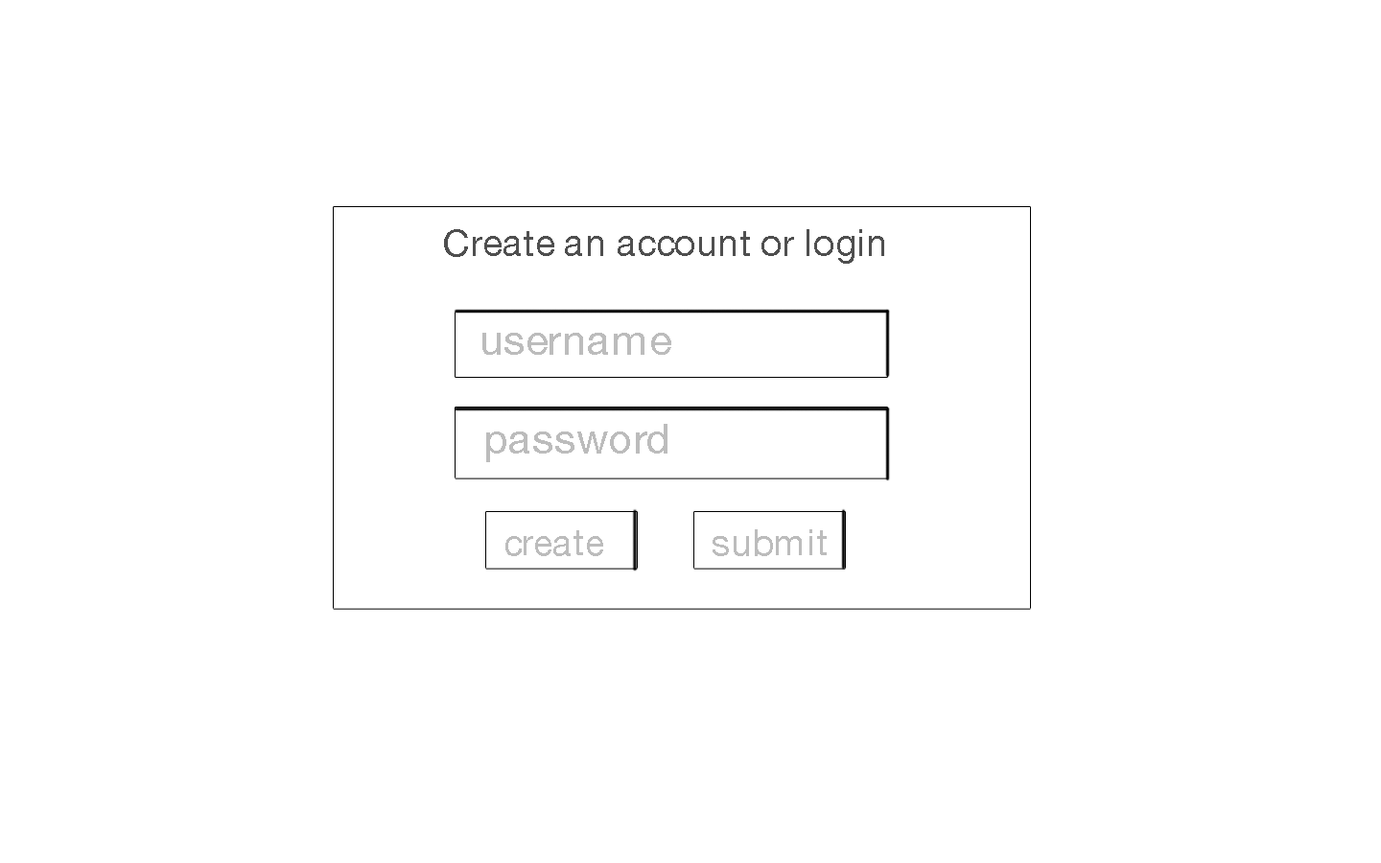
<style>
.page{position:relative;width:1381px;height:863px;background:#ffffff}
.page>*{position:absolute;margin:0}
.t1{font:37.1px "HelveticaNeue";color:#4f4f4f}
.t2{font:42.2px "HelveticaNeue";color:#bcbcbc}
.t3{font:36.6px "HelveticaNeue";color:#bcbcbc}
</style>
<div class="page">
<p class="t1" style="left:444px;top:229px;width:440px;height:35px">Create an account or login</p>
<p class="t2" style="left:482px;top:333px;width:189px;height:22px">username</p>
<p class="t2" style="left:486px;top:424px;width:182px;height:38px">password</p>
<p class="t3" style="left:506px;top:530px;width:97px;height:26px">create</p>
<p class="t3" style="left:713px;top:529px;width:114px;height:27px">submit</p>
</div>
